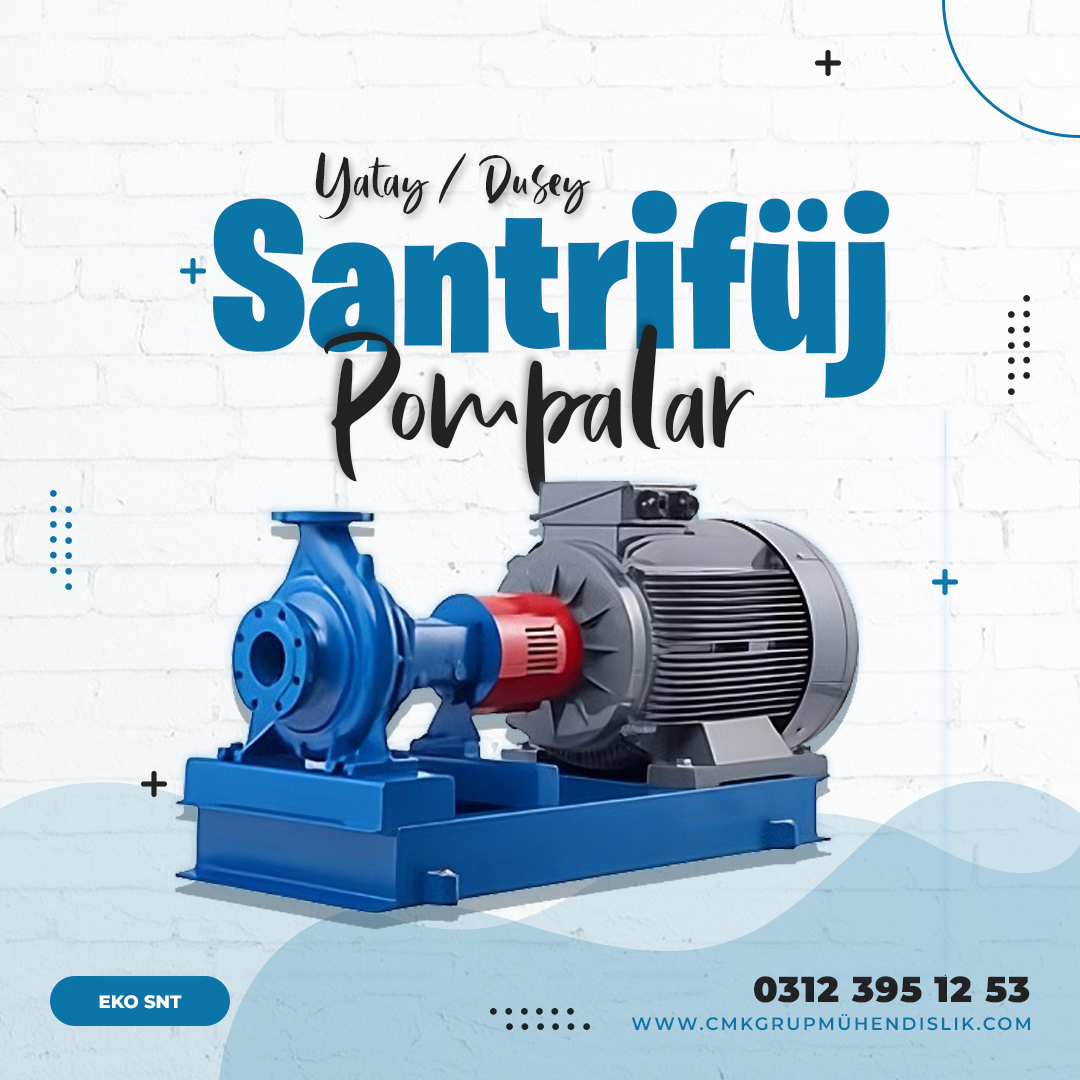
<style>
.page{position:relative;width:1080px;height:1080px}
.page>*{position:absolute;margin:0}
.t1{font:82px "LindsayBrownDEMO";color:#222222}
.t2{font:212px "BurbankBigCondensed-Black";letter-spacing:0.01em;color:#0b75a8}
.t3{font:212px "LindsayBrownDEMO";color:#222222}
.t4{font:36px "Montserrat-Black";letter-spacing:0.025em;color:#222222}
.t5{font:18px "Montserrat-ExtraBold";color:#ffffff;text-transform:uppercase}
.t6{font:18px "Montserrat-SemiBold";letter-spacing:0.12em;color:#0b75a8;text-transform:uppercase}
</style>
<div class="page">
<p class="t1" style="left:315px;top:152px;width:276px;height:67px">Yatay / Dusey</p>
<p class="t2" style="left:213px;top:190px;width:677px;height:208px">Santrifüj</p>
<p class="t3" style="left:324px;top:324px;width:431px;height:175px">Pompalar</p>
<p class="t4" style="left:754px;top:976px;width:276px;height:27px">0312 395 12 53</p>
<p class="t5" style="left:99px;top:995px;width:83px;height:14px">eko snt</p>
<p class="t6" style="left:631px;top:1014px;width:399px;height:17px">www.cmkgrupmühendislik.com</p>
</div>
